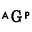
<style>
.page{position:relative;width:32px;height:32px;background:#ffffff}
.page>*{position:absolute;margin:0}
.t1{font:9.2px "Futura-Medium";color:#000000}
.t2{font:15.6px "Grad";color:#000000}
.t3{font:9.4px "Futura-Medium";color:#000000}
</style>
<div class="page">
<p class="t1" style="left:1px;top:11px;width:8px;height:8px">A</p>
<p class="t2" style="left:11px;top:10px;width:12px;height:13px">G</p>
<p class="t3" style="left:25px;top:11px;width:5px;height:8px">P</p>
</div>
